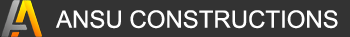
<style>
.page{position:relative;width:350px;height:37px;background:#333333}
.page>*{position:absolute;margin:0}
.t1{font:24px "ArialMT";color:#ffffff}
</style>
<div class="page">
<p class="t1" style="left:56px;top:10px;width:282px;height:19px">ANSU CONSTRUCTIONS</p>
</div>
